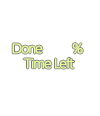
<style>
.page{position:relative;width:100px;height:116px;background:#ffffff}
.page>*{position:absolute;margin:0}
.t1{font:12px "UDShinGoPro-Light";letter-spacing:-0.08em;color:#e9ff90;font-weight:bold}
</style>
<div class="page">
<p class="t1" style="left:12px;top:43px;width:71px;height:11px">Done         %</p>
<p class="t1" style="left:23px;top:58px;width:51px;height:11px">Time Left</p>
</div>
